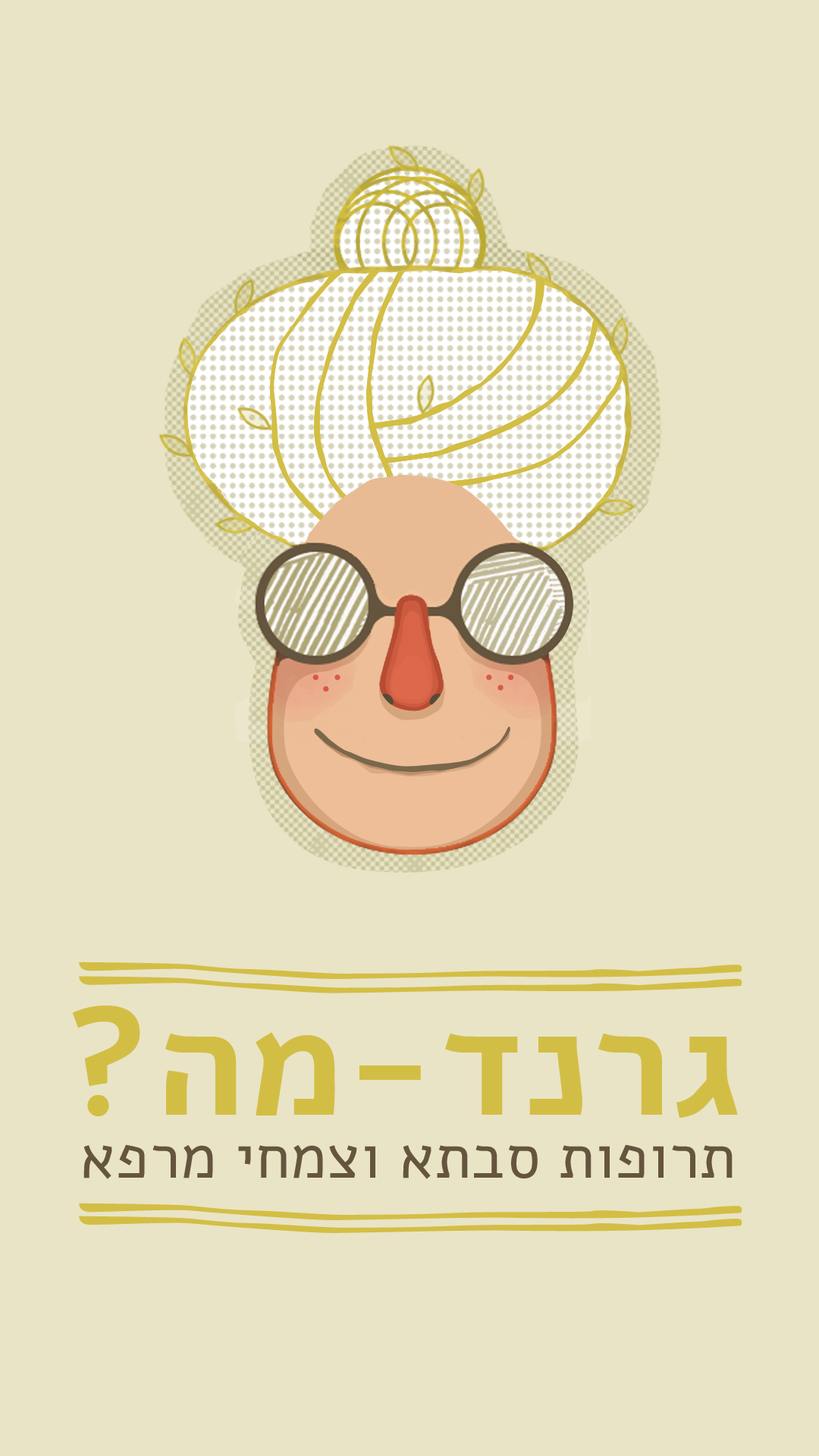
<style>
.page{position:relative;width:819px;height:1456px;background:#e9e4c6}
.page>*{position:absolute;margin:0}
.t1{font:153.4px "Alef-Bold";letter-spacing:0.01em;color:#d3be45}
.t2{font:61.7px "Alef-Regular";letter-spacing:0.01em;color:#66553e}
</style>
<div class="page">
<p class="t1" style="left:72px;top:1005px;width:666px;height:113px">?המ-דנרג</p>
<p class="t2" style="left:83px;top:1144px;width:650px;height:35px">אפרמ יחמצו אתבס תופורת</p>
</div>
